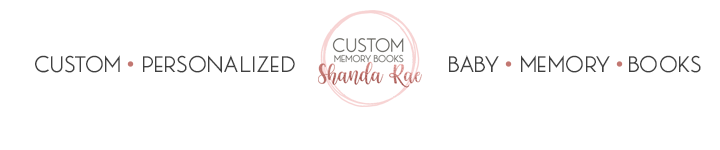
<style>
.page{position:relative;width:720px;height:150px;background:#ffffff}
.page>*{position:absolute;margin:0}
.t1{font:33.3px "MBPictureHouseOne";color:#404040}
</style>
<div class="page">
<p class="t1" style="left:35px;top:55px;width:260px;height:18px">custom personalized</p>
<p class="t1" style="left:449px;top:55px;width:252px;height:18px">baby memory books</p>
</div>
